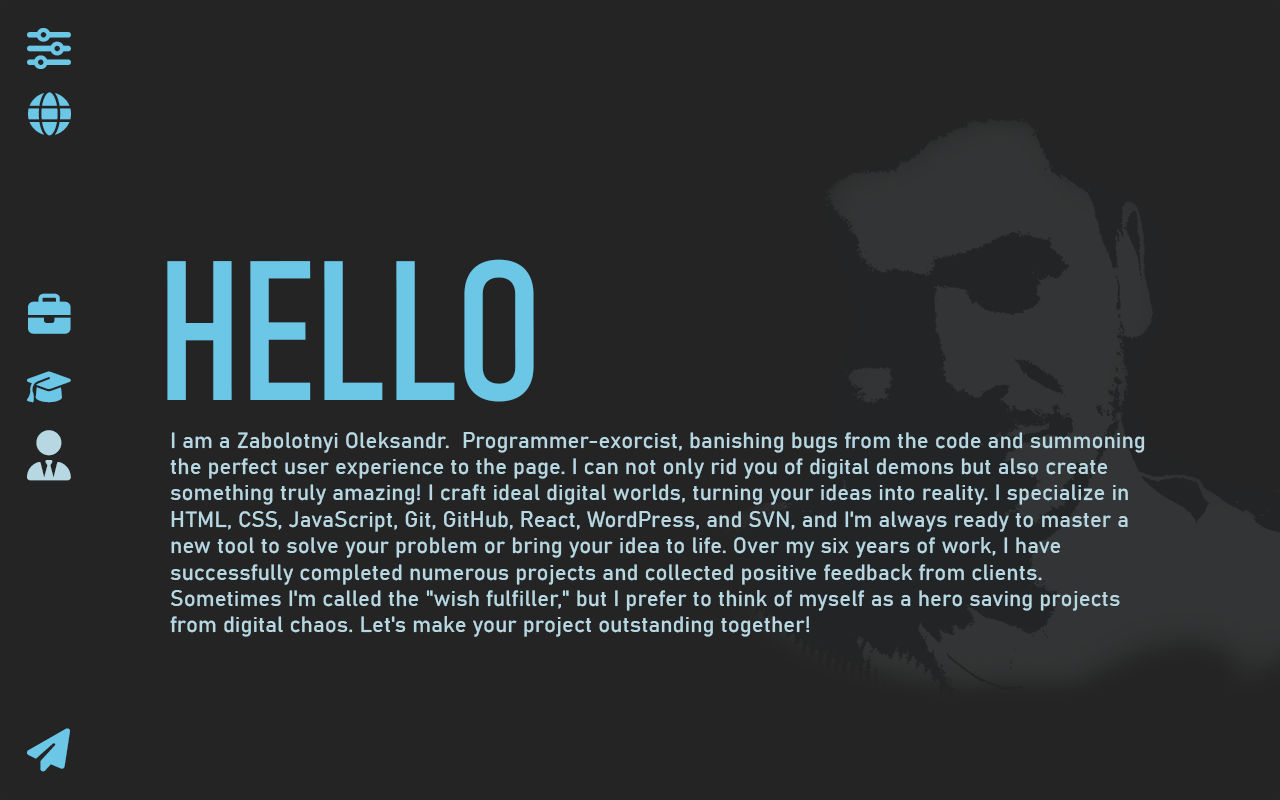
<style>
.page{position:relative;width:1280px;height:800px;background:#242424}
.page>*{position:absolute;margin:0}
.t1{font:195.5px "Bahnschrift-Condensed";color:#6cc6e5;text-transform:uppercase}
.t2{font:22px "Bahnschrift";letter-spacing:0.004em;color:#b7d8e3;font-weight:bold}
</style>
<div class="page">
<p class="t1" style="left:167px;top:259px;width:367px;height:143px">Hello</p>
<p class="t2" style="left:170px;top:432px;width:975px;height:205px">I am a Zabolotnyi Oleksandr.  Programmer-exorcist, banishing bugs from the code and summoning the perfect user experience to the page. I can not only rid you of digital demons but also create something truly amazing! I craft ideal digital worlds, turning your ideas into reality. I specialize in HTML, CSS, JavaScript, Git, GitHub, React, WordPress, and SVN, and I'm always ready to master a new tool to solve your problem or bring your idea to life. Over my six years of work, I have successfully completed numerous projects and collected positive feedback from clients. Sometimes I'm called the "wish fulfiller," but I prefer to think of myself as a hero saving projects from digital chaos. Let's make your project outstanding together!</p>
</div>
